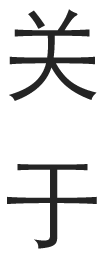
<style>
.page{position:relative;width:100px;height:255px;background:#ffffff}
.page>*{position:absolute;margin:0}
.t1{font:101.2px "STXihei";letter-spacing:0.075em;color:#242424}
</style>
<div class="page">
<p class="t1" style="left:7px;top:9px;width:90px;height:240px">关于</p>
</div>
